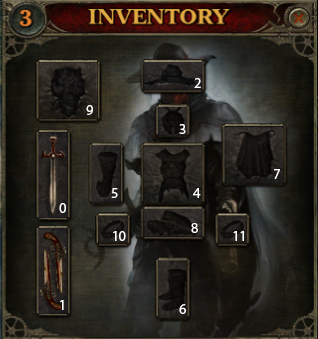
<style>
.page{position:relative;width:318px;height:339px}
.page>*{position:absolute;margin:0}
.t1{font:14px "KozGoPr6N-Regular";color:#ffffff}
</style>
<div class="page">
<p class="t1" style="left:194px;top:78px;width:7px;height:10px">2</p>
<p class="t1" style="left:86px;top:105px;width:7px;height:10px">9</p>
<p class="t1" style="left:179px;top:124px;width:7px;height:10px">3</p>
<p class="t1" style="left:274px;top:169px;width:6px;height:10px">7</p>
<p class="t1" style="left:111px;top:188px;width:7px;height:10px">5</p>
<p class="t1" style="left:193px;top:188px;width:8px;height:10px">4</p>
<p class="t1" style="left:59px;top:203px;width:7px;height:10px">0</p>
<p class="t1" style="left:113px;top:231px;width:13px;height:10px">10</p>
<p class="t1" style="left:191px;top:223px;width:7px;height:10px">8</p>
<p class="t1" style="left:233px;top:231px;width:11px;height:10px">11</p>
<p class="t1" style="left:60px;top:300px;width:4px;height:10px">1</p>
<p class="t1" style="left:179px;top:304px;width:7px;height:10px">6</p>
</div>
